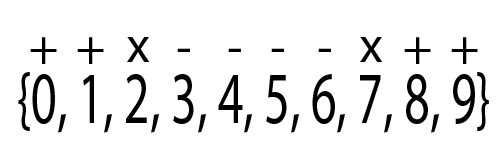
<style>
.page{position:relative;width:500px;height:150px;background:#ffffff}
.page>*{position:absolute;margin:0}
.t1{font:50px "MyriadPro-Regular";color:#000000}
.t2{font:73.9px "MyriadPro-Regular";color:#000000;scale:0.68 1}
</style>
<div class="page">
<p class="t1" style="left:30px;top:37px;width:27px;height:27px">+</p>
<p class="t1" style="left:77px;top:37px;width:27px;height:27px">+</p>
<p class="t1" style="left:127px;top:37px;width:23px;height:25px">x</p>
<p class="t1" style="left:360px;top:37px;width:23px;height:25px">x</p>
<p class="t1" style="left:404px;top:37px;width:27px;height:27px">+</p>
<p class="t1" style="left:451px;top:37px;width:27px;height:27px">+</p>
<p class="t1" style="left:177px;top:48px;width:13px;height:4px">-</p>
<p class="t1" style="left:228px;top:48px;width:13px;height:4px">-</p>
<p class="t1" style="left:271px;top:48px;width:13px;height:4px">-</p>
<p class="t1" style="left:318px;top:48px;width:13px;height:4px">-</p>
<p class="t2" style="left:18px;top:72px;width:471px;height:61px">{0, 1, 2, 3, 4, 5, 6, 7, 8, 9}</p>
</div>
